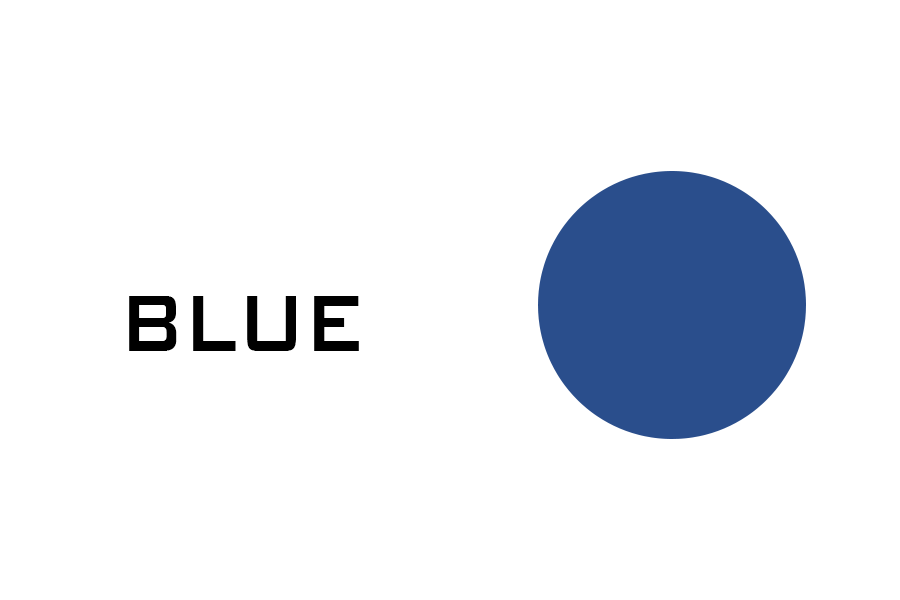
<style>
.page{position:relative;width:900px;height:600px;background:#ffffff}
.page>*{position:absolute;margin:0}
.t1{font:130px "BankGothicBT-Medium";color:#000000;scale:0.75 1}
</style>
<div class="page">
<p class="t1" style="left:129px;top:296px;width:230px;height:55px">blue</p>
</div>
